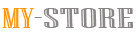
<style>
.page{position:relative;width:139px;height:39px;background:#ffffff}
.page>*{position:absolute;margin:0}
.t1{font:29px "NiagaraEngraved-Reg";color:#fe980f;scale:1.68 1}
.t2{font:29.4px "NiagaraEngraved-Reg";color:#8b8686;scale:2.05 1}
</style>
<div class="page">
<p class="t1" style="left:2px;top:8px;width:32px;height:20px">MY</p>
<p class="t2" style="left:34px;top:8px;width:99px;height:20px">-STORE</p>
</div>
